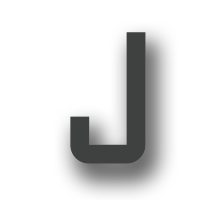
<style>
.page{position:relative;width:215px;height:200px;background:#ffffff}
.page>*{position:absolute;margin:0}
.t1{font:150px "Manteka";color:#3f4040}
</style>
<div class="page">
<p class="t1" style="left:70px;top:32px;width:76px;height:132px">J</p>
</div>
